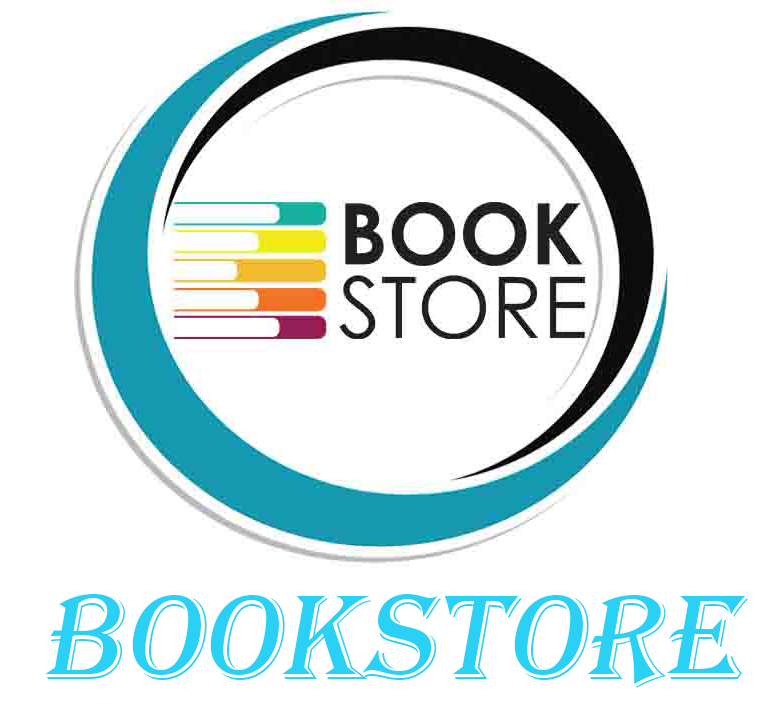
<style>
.page{position:relative;width:762px;height:708px;background:#ffffff}
.page>*{position:absolute;margin:0}
.t1{font:125px "Algerian";color:#2bd1f4;font-style:italic}
</style>
<div class="page">
<p class="t1" style="left:45px;top:594px;width:703px;height:94px">BookStore</p>
</div>
